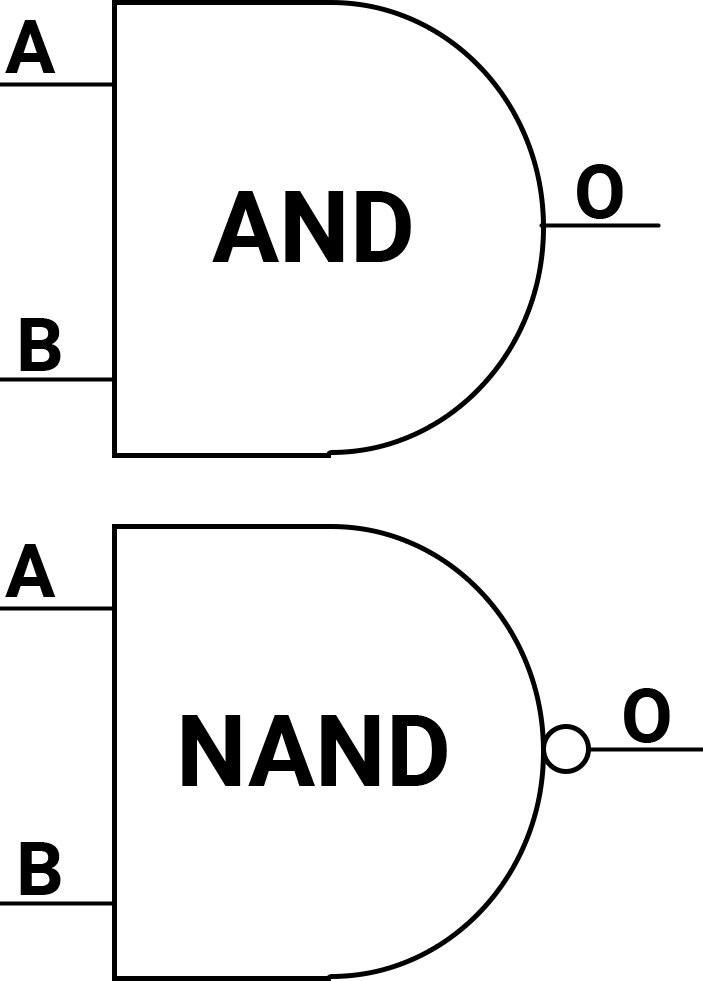
<style>
.page{position:relative;width:703px;height:981px;background:#ffffff}
.page>*{position:absolute;margin:0}
.t1{font:75px "Roboto-Bold";color:#000000}
.t2{font:100px "Roboto-Bold";color:#000000}
</style>
<div class="page">
<p class="t1" style="left:5px;top:20px;width:51px;height:53px">A</p>
<p class="t1" style="left:577px;top:164px;width:46px;height:55px">O</p>
<p class="t2" style="left:212px;top:191px;width:199px;height:71px">AND</p>
<p class="t1" style="left:20px;top:318px;width:41px;height:53px">B</p>
<p class="t1" style="left:5px;top:544px;width:51px;height:53px">A</p>
<p class="t1" style="left:624px;top:688px;width:46px;height:55px">O</p>
<p class="t2" style="left:182px;top:715px;width:265px;height:71px">NAND</p>
<p class="t1" style="left:20px;top:842px;width:41px;height:53px">B</p>
</div>
